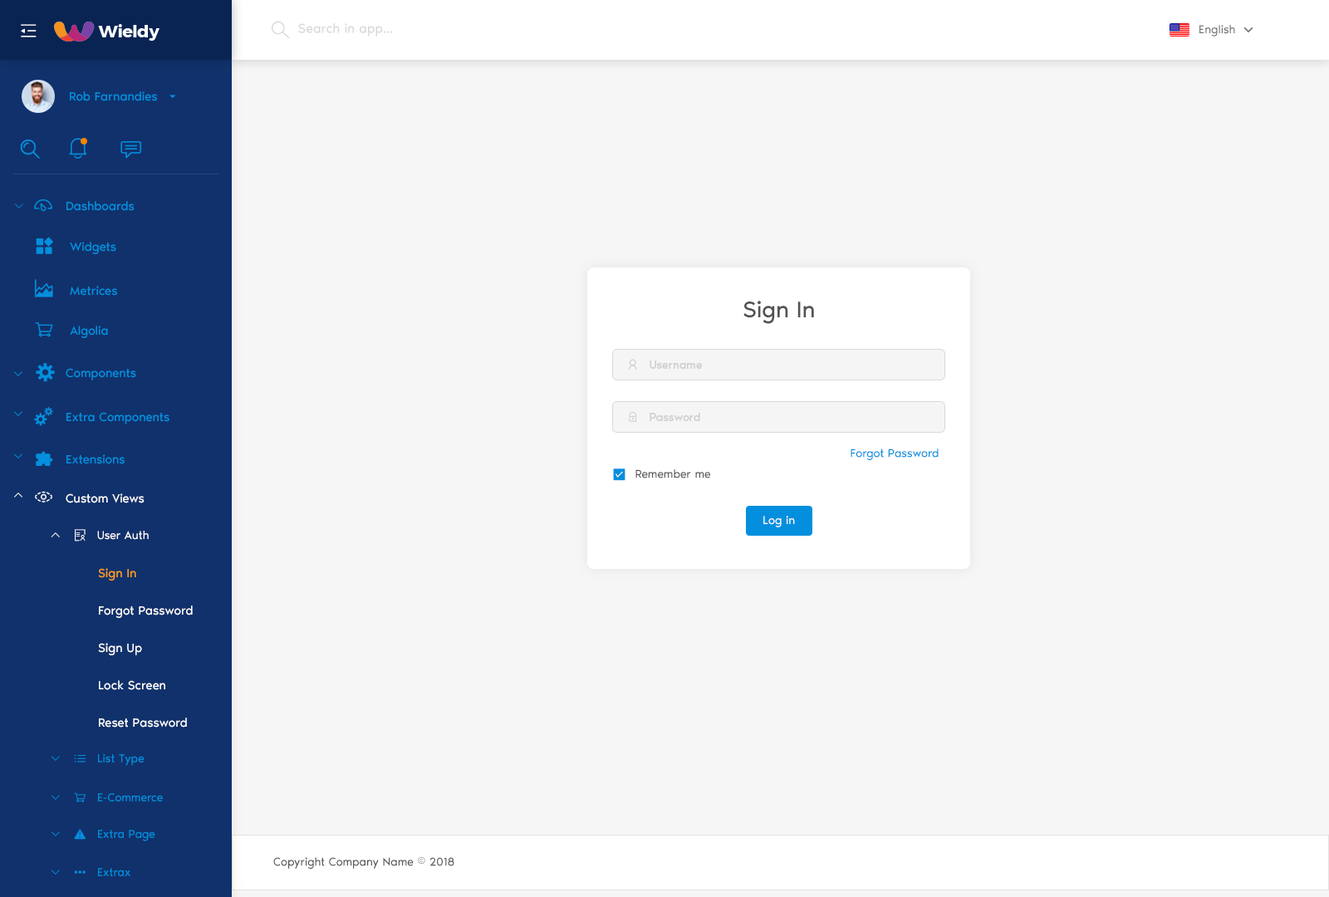
<style>
.page{position:relative;width:1329px;height:897px;background:#f6f6f6}
.page>*{position:absolute;margin:0}
.t1{font:13.3px "NoirPro-Regular";color:#d9d9d9}
.t2{font:11.6px "NoirPro-Regular";color:#757575}
.t3{font:12.5px "NoirPro-Regular";color:#038fde}
.t4{font:10px "gaxonant"}
.t5{font:18.3px "gaxonant";color:#038fde}
.t6{font:23.3px "NoirPro-Regular";color:#535353}
.t7{font:11.6px "NoirPro-Regular";color:#cfcfcf}
.t8{font:9.7px "gaxonant";color:#038fde}
.t9{font:11.6px "NoirPro-Regular";color:#038fde}
.t10{font:11.6px "NoirPro-Regular";color:#595959}
.t11{font:18.3px "gaxonant";color:#ffffff}
.t12{font:12.5px "NoirPro-Regular";color:#ffffff}
.t13{font:11.6px "NoirPro-Regular";color:#ffffff}
.t14{font:10px "gaxonant";color:#ffffff}
.t15{font:11.6px "gaxonant";color:#ffffff}
.t16{font:12.5px/33.2px "NoirPro-Regular";color:#ffffff}
.t17{font:12.5px/33.2px "NoirPro-Regular";color:#fe9e15}
.t18{font:10px "gaxonant";color:#038fde}
.t19{font:11.6px "gaxonant";color:#038fde}
</style>
<div class="page">
<p class="t1" style="left:298px;top:23px;width:95px;height:14px">Search in app...</p>
<p class="t2" style="left:1200px;top:25px;width:35px;height:12px">English</p>
<p class="t3" style="left:70px;top:91px;width:87px;height:10px">Rob Farnandies</p>
<p class="t4" style="left:15px;top:204px;width:8px;height:5px">2</p>
<p class="t5" style="left:34px;top:199px;width:18px;height:13px">-</p>
<p class="t3" style="left:66px;top:201px;width:69px;height:10px">Dashboards</p>
<p class="t3" style="left:70px;top:242px;width:46px;height:12px">Widgets</p>
<p class="t5" style="left:35px;top:279px;width:18px;height:18px">m</p>
<p class="t3" style="left:70px;top:286px;width:47px;height:10px">Metrices</p>
<p class="t6" style="left:743px;top:301px;width:71px;height:23px">Sign In</p>
<p class="t3" style="left:70px;top:326px;width:38px;height:12px">Algolia</p>
<p class="t5" style="left:36px;top:363px;width:19px;height:19px">%</p>
<p class="t7" style="left:650px;top:361px;width:52px;height:8px">Username</p>
<p class="t8" style="left:14px;top:371px;width:8px;height:5px">2</p>
<p class="t3" style="left:66px;top:368px;width:70px;height:12px">Components</p>
<p class="t8" style="left:14px;top:411px;width:8px;height:5px">2</p>
<p class="t3" style="left:66px;top:412px;width:103px;height:12px">Extra Components</p>
<p class="t7" style="left:650px;top:413px;width:50px;height:8px">Password</p>
<p class="t9" style="left:851px;top:449px;width:88px;height:11px">Forgot Password</p>
<p class="t8" style="left:14px;top:454px;width:8px;height:5px">2</p>
<p class="t3" style="left:66px;top:454px;width:59px;height:10px">Extensions</p>
<p class="t10" style="left:635px;top:469px;width:75px;height:9px">Remember me</p>
<p class="t4" style="left:14px;top:493px;width:8px;height:5px">5</p>
<p class="t11" style="left:35px;top:491px;width:17px;height:12px">,</p>
<p class="t12" style="left:66px;top:493px;width:79px;height:10px">Custom Views</p>
<p class="t13" style="left:763px;top:516px;width:32px;height:11px">Log in</p>
<p class="t14" style="left:51px;top:532px;width:9px;height:5px">5</p>
<p class="t15" style="left:75px;top:529px;width:11px;height:13px">r</p>
<p class="t13" style="left:97px;top:531px;width:52px;height:9px">User Auth</p>
<p class="t16" style="left:98px;top:568px;width:95px;height:160px"><span class="t17">Sign In<br></span>Forgot Password<br>Sign Up<br>Lock Screen<br>Reset Password</p>
<p class="t18" style="left:52px;top:756px;width:8px;height:5px">2</p>
<p class="t19" style="left:74px;top:754px;width:12px;height:9px">h</p>
<p class="t9" style="left:98px;top:754px;width:47px;height:12px">List Type</p>
<p class="t18" style="left:52px;top:795px;width:8px;height:5px">2</p>
<p class="t9" style="left:98px;top:793px;width:65px;height:9px">E-Commerce</p>
<p class="t18" style="left:52px;top:832px;width:8px;height:5px">2</p>
<p class="t19" style="left:74px;top:829px;width:12px;height:11px">~</p>
<p class="t9" style="left:98px;top:830px;width:57px;height:12px">Extra Page</p>
<p class="t10" style="left:273px;top:857px;width:181px;height:12px">Copyright Company Name © 2018</p>
<p class="t18" style="left:52px;top:870px;width:8px;height:5px">2</p>
<p class="t9" style="left:98px;top:868px;width:32px;height:8px">Extrax</p>
<p class="t19" style="left:74px;top:871px;width:12px;height:3px">{</p>
</div>
